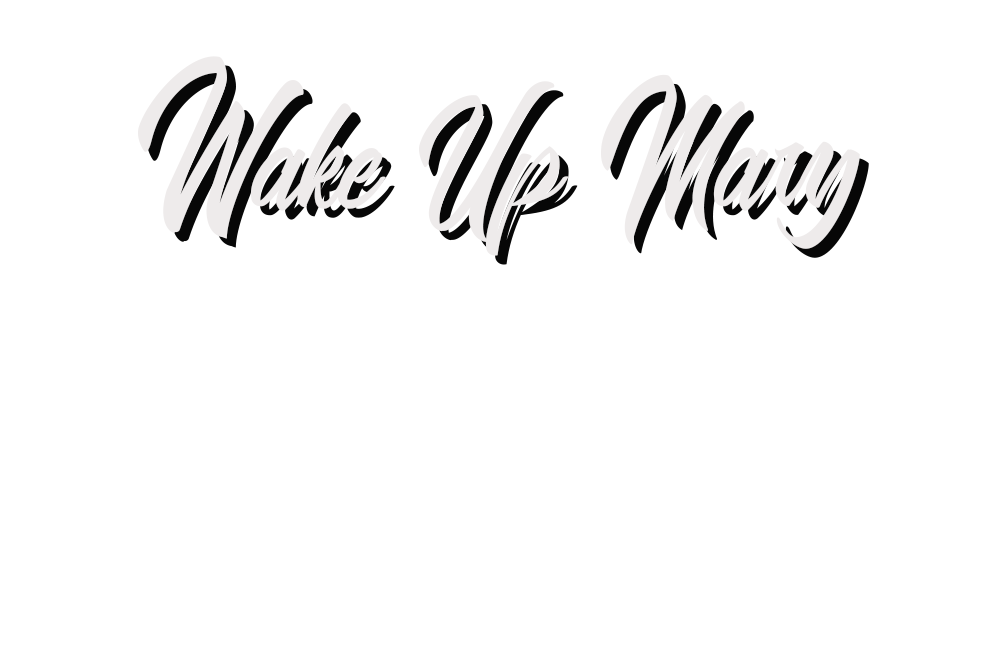
<style>
.page{position:relative;width:1000px;height:650px;background:#ffffff}
.page>*{position:absolute;margin:0}
.t1{font:150px "BlangkonScriptRegular";color:#070707}
</style>
<div class="page">
<p class="t1" style="left:147px;top:65px;width:722px;height:200px">Wake Up Mary</p>
</div>
